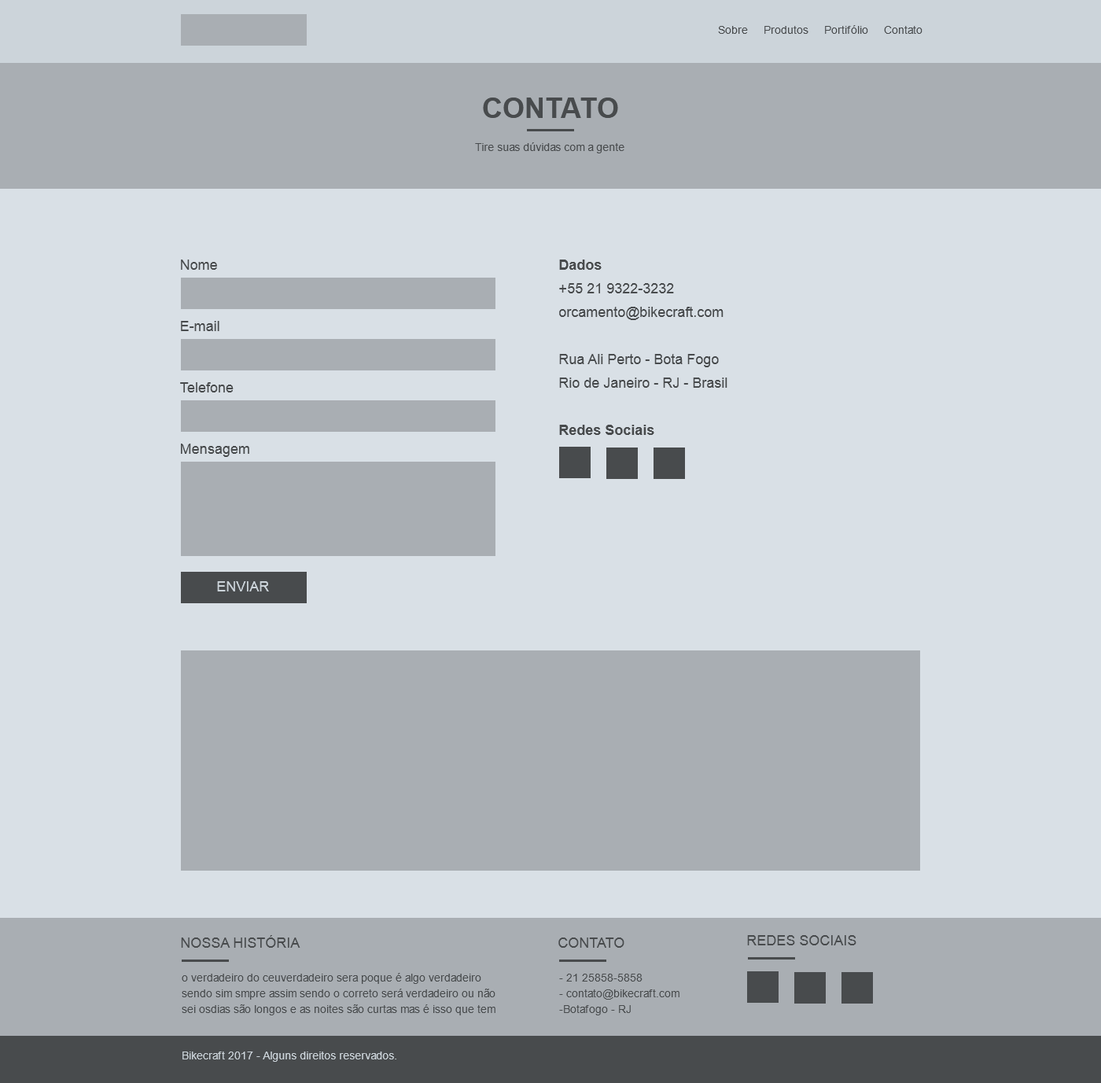
<style>
.page{position:relative;width:1101px;height:1083px;background:#d9e0e6}
.page>*{position:absolute;margin:0}
.t1{font:11px "ArialMT";color:#484b4d}
.t2{font:28.3px "Arial-BoldMT";color:#484b4d;text-transform:uppercase}
.t3{font:14.2px "ArialMT";color:#484b4d}
.t4{font:14.2px/23.6px "ArialMT";color:#484b4d}
.t5{font:14.2px/23.6px "Arial-BoldMT";color:#484b4d}
.t6{font:14.2px "ArialMT";color:#ccd4da}
.t7{font:14.2px "ArialMT";color:#484b4d;text-transform:uppercase}
.t8{font:11px/15.7px "ArialMT";color:#484b4d}
.t9{font:11px "ArialMT";color:#ccd4da}
</style>
<div class="page">
<p class="t1" style="left:718px;top:25px;width:205px;height:9px">Sobre     Produtos     Portifólio     Contato</p>
<p class="t2" style="left:483px;top:98px;width:135px;height:20px">CONTATO</p>
<p class="t1" style="left:475px;top:142px;width:149px;height:11px">Tire suas dúvidas com a gente</p>
<p class="t3" style="left:181px;top:260px;width:36px;height:10px">Nome</p>
<p class="t4" style="left:559px;top:260px;width:168px;height:175px"><span class="t5">Dados </span><br>+55 21 9322-3232<br>orcamento@bikecraft.com<br><br>Rua Ali Perto - Bota Fogo<br>Rio de Janeiro - RJ - Brasil<br><br><span class="t5">Redes Sociais</span></p>
<p class="t3" style="left:181px;top:321px;width:38px;height:10px">E-mail</p>
<p class="t3" style="left:180px;top:382px;width:54px;height:10px">Telefone</p>
<p class="t3" style="left:181px;top:444px;width:68px;height:13px">Mensagem</p>
<p class="t6" style="left:217px;top:581px;width:52px;height:10px">ENVIAR</p>
<p class="t7" style="left:181px;top:935px;width:119px;height:13px">Nossa História</p>
<p class="t7" style="left:558px;top:937px;width:66px;height:11px">CONTATO</p>
<p class="t7" style="left:747px;top:935px;width:109px;height:10px">REDES SOCIAIS</p>
<p class="t8" style="left:182px;top:973px;width:313px;height:42px">o verdadeiro do ceuverdadeiro sera poque é algo verdadeiro sendo sim smpre assim sendo o correto será verdadeiro ou não sei osdias são longos e as noites são curtas mas é isso que tem</p>
<p class="t8" style="left:559px;top:974px;width:121px;height:41px">- 21 25858-5858<br>- contato@bikecraft.com<br>-Botafogo - RJ</p>
<p class="t9" style="left:182px;top:1052px;width:214px;height:10px">Bikecraft 2017 - Alguns direitos reservados.</p>
</div>
